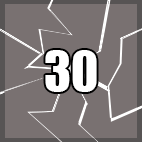
<style>
.page{position:relative;width:142px;height:142px;background:#797171}
.page>*{position:absolute;margin:0}
.t1{font:51px "Impact";color:#ffffff}
</style>
<div class="page">
<p class="t1" style="left:45px;top:50px;width:52px;height:42px">30</p>
</div>
